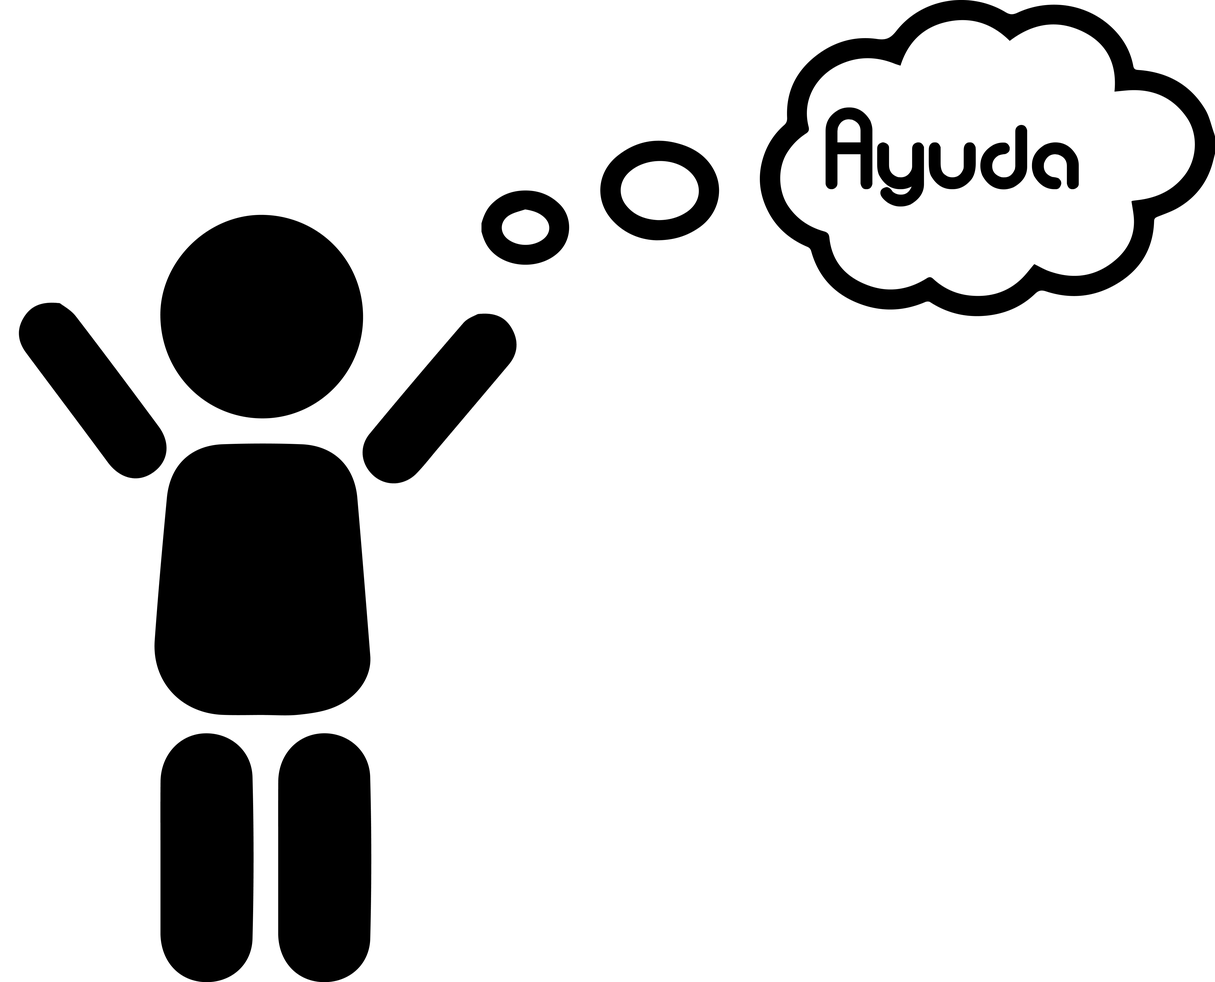
<style>
.page{position:relative;width:1215px;height:982px;background:#ffffff}
.page>*{position:absolute;margin:0}
.t1{font:96.2px "gitchgitch";color:#000000}
</style>
<div class="page">
<p class="t1" style="left:825px;top:107px;width:253px;height:100px">Ayuda</p>
</div>
